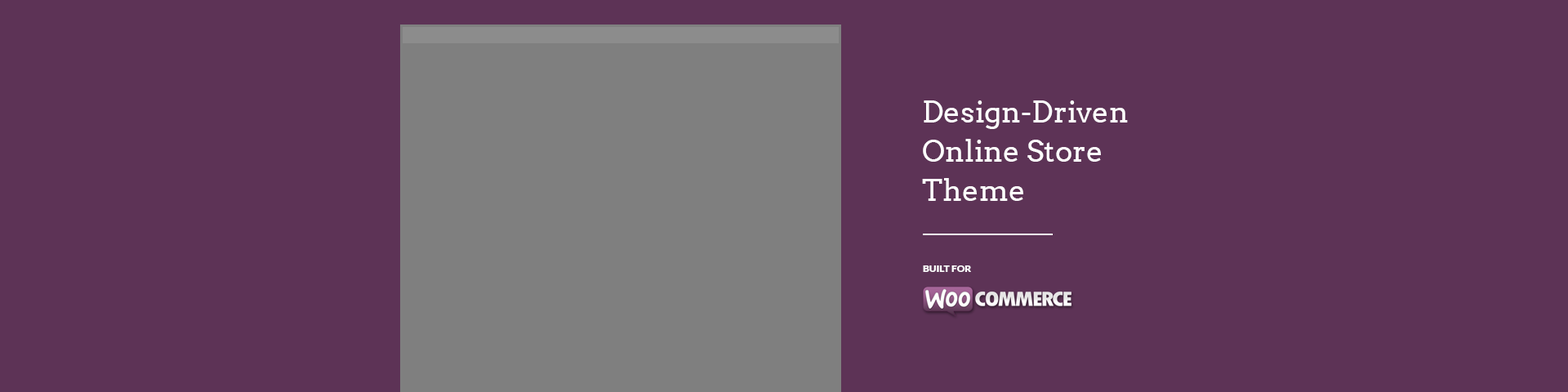
<style>
.page{position:relative;width:1568px;height:392px;background:#5d3356}
.page>*{position:absolute;margin:0}
.t1{font:29.4px/39.2px "Arvo";color:#ffffff}
.t2{font:9.8px "Lato-Black";color:#ffffff;text-transform:uppercase}
</style>
<div class="page">
<p class="t1" style="left:922px;top:100px;width:206px;height:101px">Design-Driven<br>Online Store<br>Theme</p>
<p class="t2" style="left:923px;top:265px;width:48px;height:7px">BUILT FOR</p>
</div>
